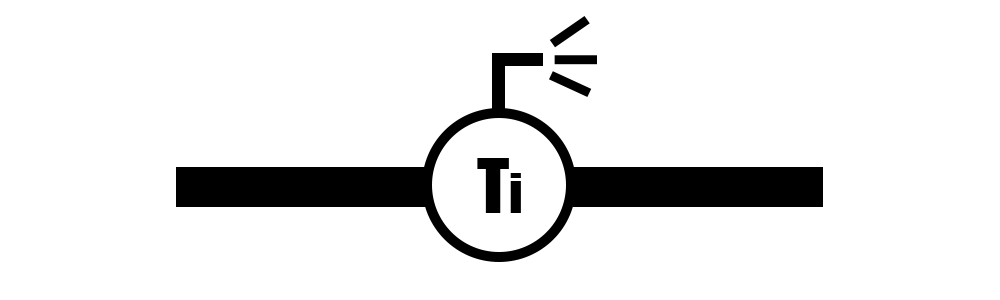
<style>
.page{position:relative;width:1000px;height:300px;background:#ffffff}
.page>*{position:absolute;margin:0}
.t1{font:70px "Impact";color:#000000}
.t2{font:50px "Impact";color:#000000}
</style>
<div class="page">
<p class="t1" style="left:477px;top:158px;width:44px;height:55px">T<span class="t2">i</span></p>
</div>
